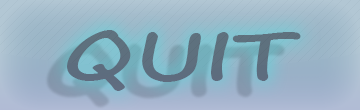
<style>
.page{position:relative;width:360px;height:110px}
.page>*{position:absolute;margin:0}
.t1{font:68.3px "SegoePrint-Bold";color:#5e6f7e;scale:1.31 1}
</style>
<div class="page">
<p class="t1" style="left:67px;top:30px;width:234px;height:61px">QUIT</p>
</div>
